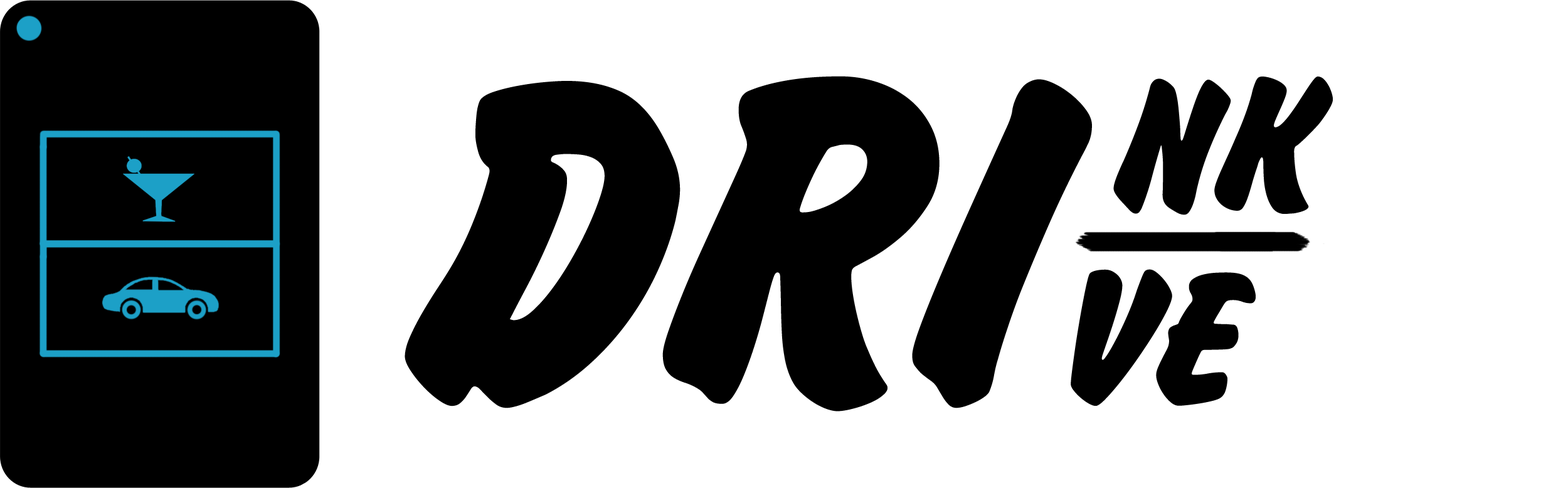
<style>
.page{position:relative;width:1568px;height:488px;background:#ffffff}
.page>*{position:absolute;margin:0}
.t1{font:489.2px "BrushHandNew";color:#000000}
.t2{font:200.7px "BrushHandNew";color:#000000}
</style>
<div class="page">
<p class="t1" style="left:405px;top:76px;width:687px;height:335px">DRI</p>
<p class="t2" style="left:1113px;top:77px;width:220px;height:138px">NK</p>
<p class="t2" style="left:1071px;top:269px;width:185px;height:137px">VE</p>
</div>
